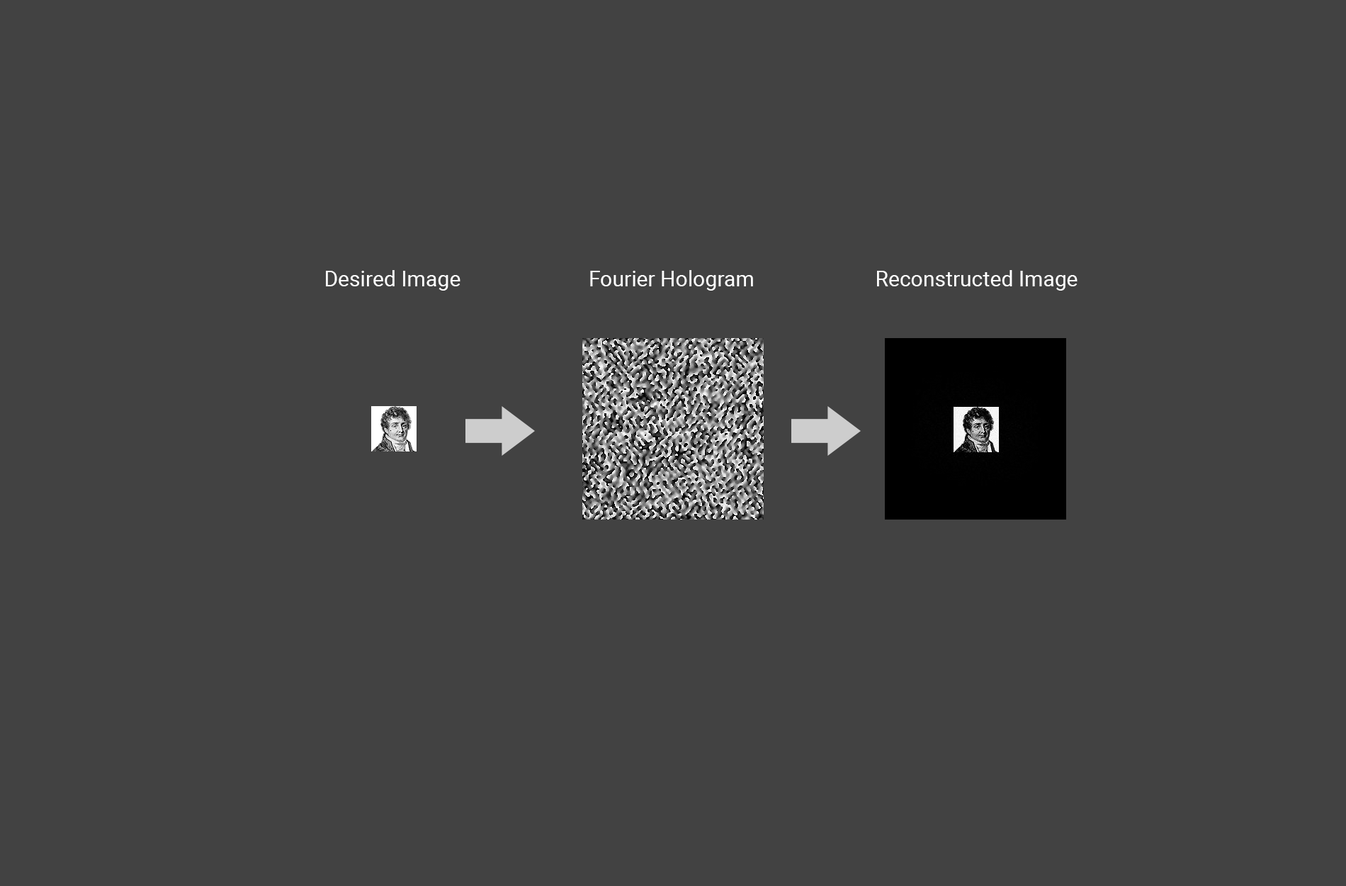
<style>
.page{position:relative;width:1346px;height:886px;background:#424242}
.page>*{position:absolute;margin:0}
.t1{font:21.4px "Roboto-Regular";color:#ffffff}
</style>
<div class="page">
<p class="t1" style="left:326px;top:270px;width:135px;height:21px">Desired Image</p>
<p class="t1" style="left:590px;top:270px;width:163px;height:21px">Fourier Hologram</p>
<p class="t1" style="left:877px;top:270px;width:201px;height:21px">Reconstructed Image</p>
</div>
